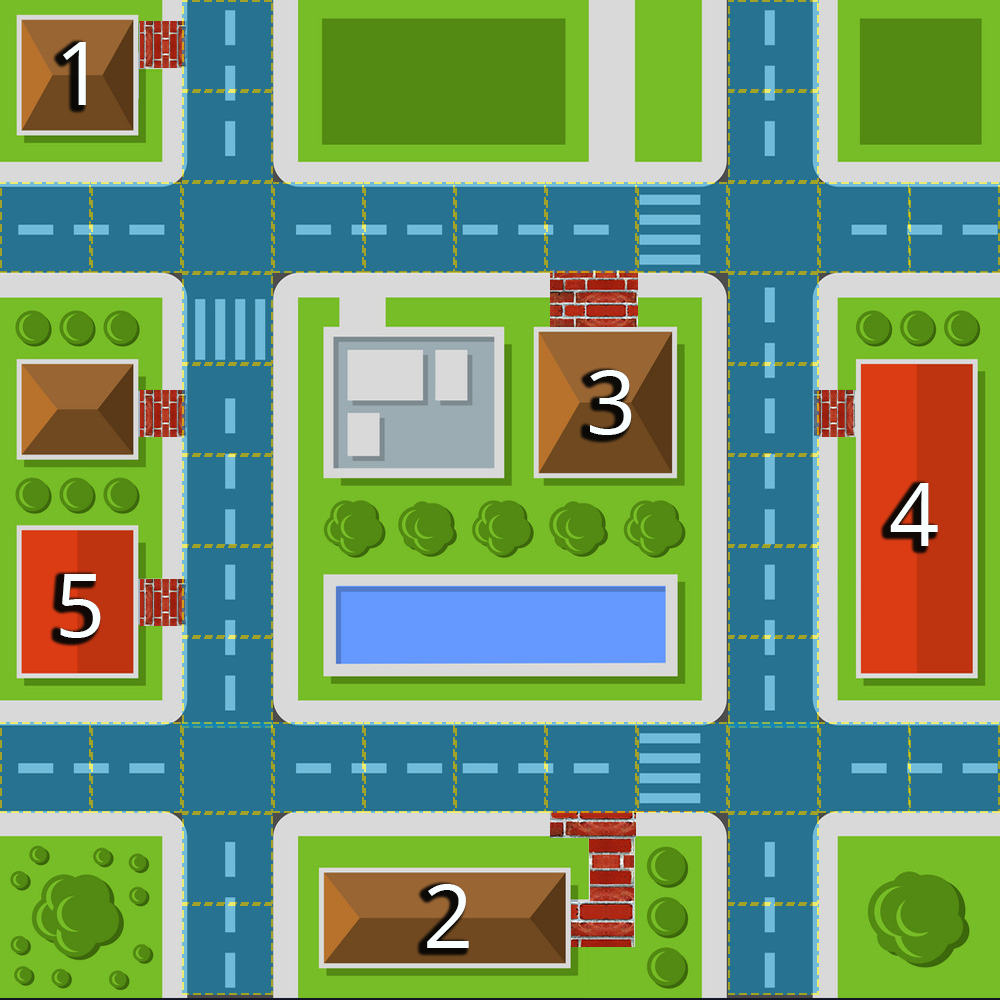
<style>
.page{position:relative;width:1000px;height:1000px;background:#287291}
.page>*{position:absolute;margin:0}
.t1{font:87.5px "OpenSans";color:#f9fefe}
</style>
<div class="page">
<p class="t1" style="left:63px;top:42px;width:23px;height:63px">1</p>
<p class="t1" style="left:590px;top:370px;width:42px;height:65px">3</p>
<p class="t1" style="left:890px;top:483px;width:48px;height:63px">4</p>
<p class="t1" style="left:60px;top:574px;width:41px;height:64px">5</p>
<p class="t1" style="left:427px;top:884px;width:42px;height:64px">2</p>
</div>
